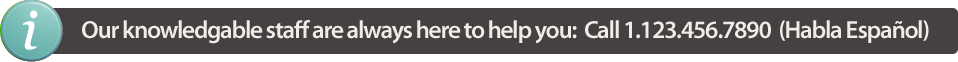
<style>
.page{position:relative;width:958px;height:62px;background:#454142}
.page>*{position:absolute;margin:0}
.t1{font:25px "MyriadPro-Semibold";letter-spacing:-0.05em;color:#efede5}
</style>
<div class="page">
<p class="t1" style="left:82px;top:20px;width:847px;height:24px">Our knowledgable staff are always here to help you:  Call 1.123.456.7890  (Habla Español)</p>
</div>
